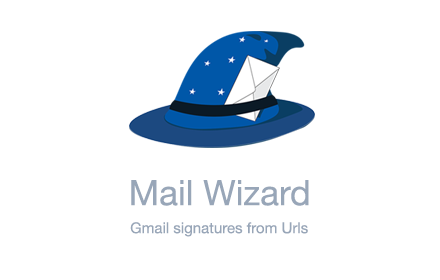
<style>
.page{position:relative;width:440px;height:280px;background:#ffffff}
.page>*{position:absolute;margin:0}
.t1{font:35px "HelveticaNeue";color:#98a6b8}
.t2{font:15px "HelveticaNeue";color:#98a6b8}
</style>
<div class="page">
<p class="t1" style="left:131px;top:180px;width:178px;height:26px">Mail Wizard</p>
<p class="t2" style="left:130px;top:222px;width:178px;height:15px">Gmail signatures from Urls</p>
</div>
